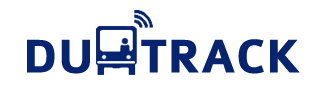
<style>
.page{position:relative;width:324px;height:90px;background:#ffffff}
.page>*{position:absolute;margin:0}
.t1{font:50px "Colaborate-Bold";color:#06246f}
</style>
<div class="page">
<p class="t1" style="left:27px;top:39px;width:63px;height:35px">DU</p>
<p class="t1" style="left:141px;top:39px;width:159px;height:35px">TRACK</p>
</div>
